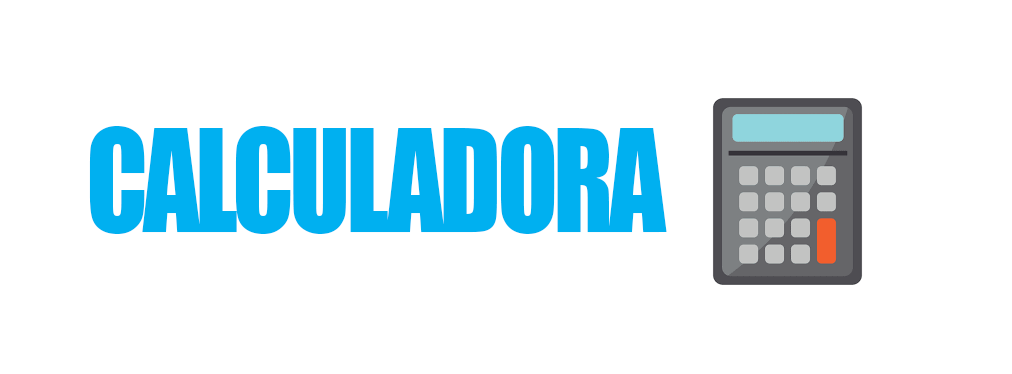
<style>
.page{position:relative;width:1012px;height:374px;background:#ffffff}
.page>*{position:absolute;margin:0}
.t1{font:130.8px "Impact";letter-spacing:-0.04em;color:#00b0f0;scale:0.85 1}
</style>
<div class="page">
<p class="t1" style="left:89px;top:126px;width:578px;height:108px">CALCULADORA</p>
</div>
